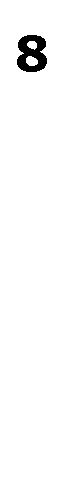
<style>
.page{position:relative;width:64px;height:500px;background:#ffffff}
.page>*{position:absolute;margin:0}
.t1{font:48px "Verdana-Bold";color:#000000}
</style>
<div class="page">
<p class="t1" style="left:17px;top:35px;width:30px;height:37px">8</p>
</div>
